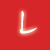
<style>
.page{position:relative;width:50px;height:50px;background:#d62629}
.page>*{position:absolute;margin:0}
.t1{font:32px "SketchFlowPrint";color:#ffffff}
</style>
<div class="page">
<p class="t1" style="left:20px;top:11px;width:17px;height:23px">L</p>
</div>
